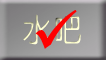
<style>
.page{position:relative;width:106px;height:60px}
.page>*{position:absolute;margin:0}
.t1{font:32px "DFYuan-Lt-HKP-BF";letter-spacing:0.1em;scale:0.88 1}
</style>
<div class="page">
<p class="t1" style="left:23px;top:14px;width:58px;height:31px">水吧</p>
</div>
